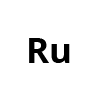
<style>
.page{position:relative;width:100px;height:100px;background:#ffffff}
.page>*{position:absolute;margin:0}
.t1{font:35px "OpenSans-Bold";color:#000000}
</style>
<div class="page">
<p class="t1" style="left:29px;top:38px;width:41px;height:25px">Ru</p>
</div>
